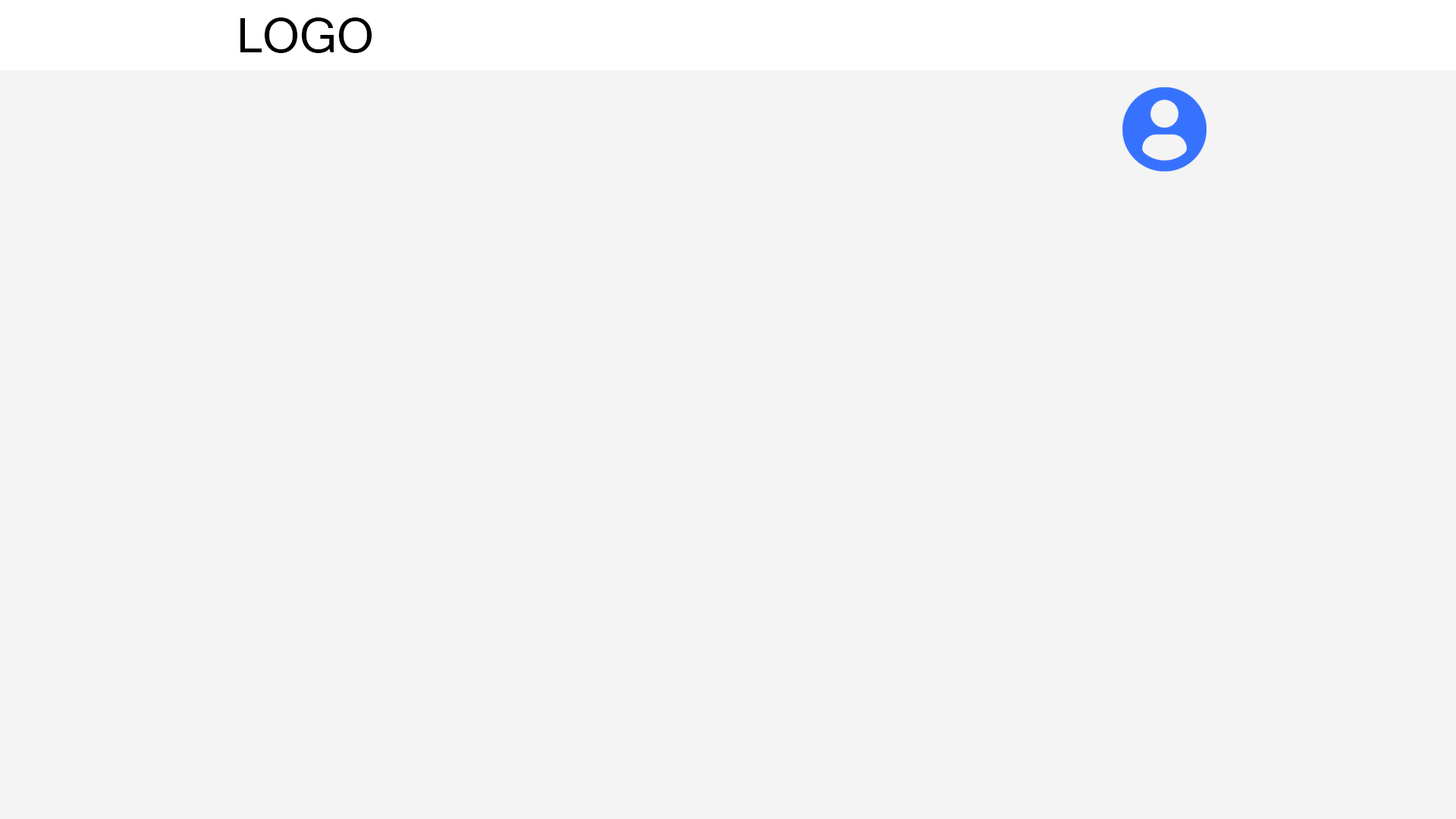
<style>
.page{position:relative;width:1456px;height:819px;background:#f4f4f4}
.page>*{position:absolute;margin:0}
.t1{font:47.4px "MicrosoftSansSerif";color:#000000}
</style>
<div class="page">
<p class="t1" style="left:240px;top:17px;width:132px;height:36px">LOGO</p>
</div>
